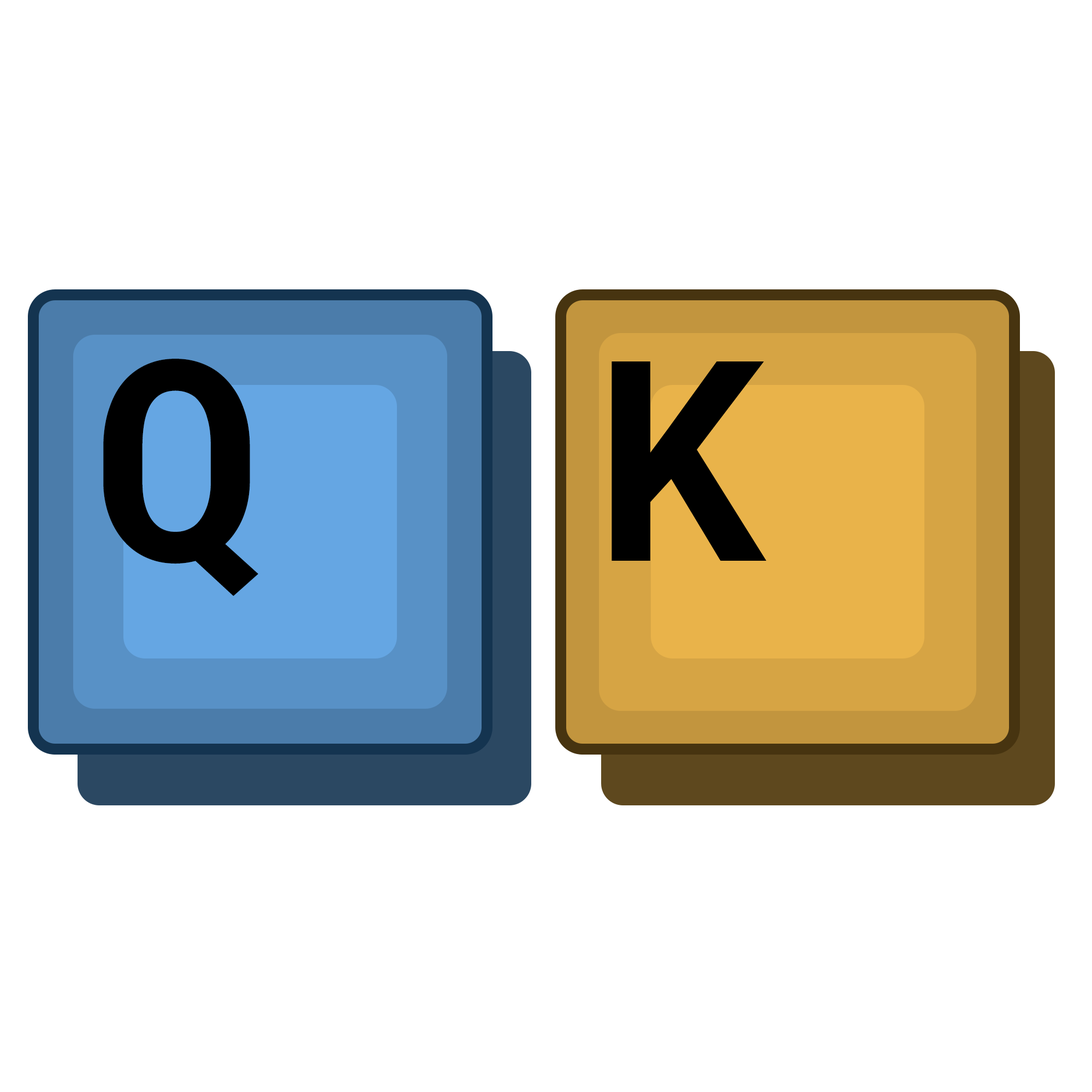
<style>
.page{position:relative;width:1092px;height:1092px;background:#ffffff}
.page>*{position:absolute;margin:0}
.t1{font:280.2px "RobotoMono-Bold";color:#000000}
</style>
<div class="page">
<p class="t1" style="left:103px;top:359px;width:155px;height:237px">Q</p>
<p class="t1" style="left:612px;top:361px;width:155px;height:200px">K</p>
</div>
